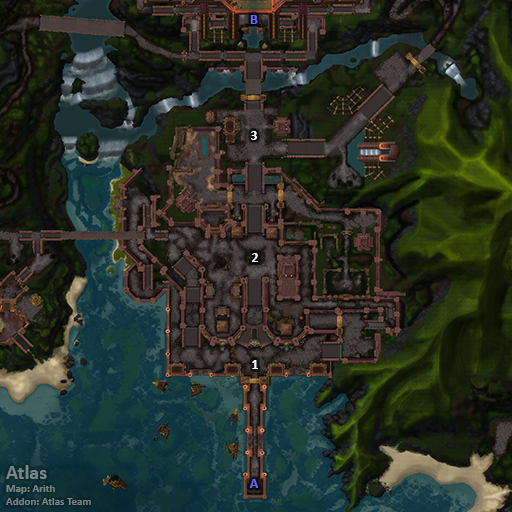
<style>
.page{position:relative;width:512px;height:512px}
.page>*{position:absolute;margin:0}
.t1{font:14px "Calibri-Bold";color:#6666ff}
.t2{font:14px "Calibri-Bold";color:#ffffff}
.t3{font:11px "Calibri-Bold";color:#798688}
.t4{font:20px "Calibri-Bold";color:#798688}
</style>
<div class="page">
<p class="t1" style="left:250px;top:15px;width:8px;height:9px">B</p>
<p class="t2" style="left:251px;top:131px;width:6px;height:9px">3</p>
<p class="t2" style="left:252px;top:253px;width:7px;height:9px">2</p>
<p class="t2" style="left:252px;top:360px;width:6px;height:9px">1</p>
<p class="t3" style="left:6px;top:465px;width:85px;height:40px"><span class="t4">Atlas<br></span>Map: Arith<br>Addon: Atlas Team</p>
<p class="t1" style="left:249px;top:479px;width:9px;height:9px">A</p>
</div>
